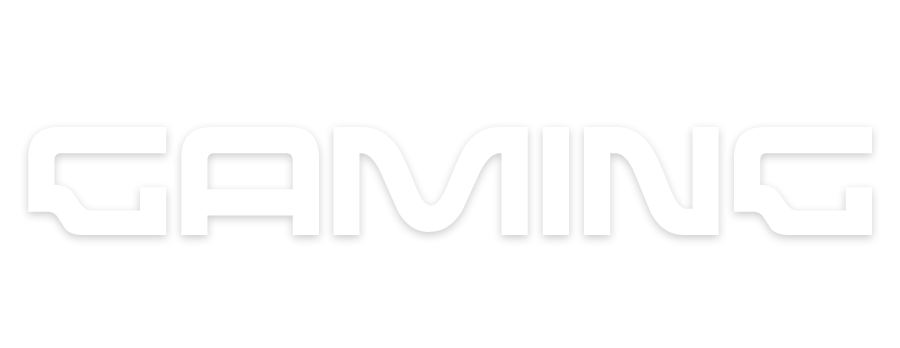
<style>
.page{position:relative;width:900px;height:348px;background:#ffffff}
.page>*{position:absolute;margin:0}
.t1{font:191px "DominatorMedium";color:#ffffff}
</style>
<div class="page">
<p class="t1" style="left:28px;top:127px;width:844px;height:108px">GAMING</p>
</div>
